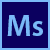
<style>
.page{position:relative;width:50px;height:50px;background:#0b005f}
.page>*{position:absolute;margin:0}
.t1{font:31.3px "MyriadPro-Semibold";color:#7ab9f8}
</style>
<div class="page">
<p class="t1" style="left:7px;top:15px;width:36px;height:21px">Ms</p>
</div>
